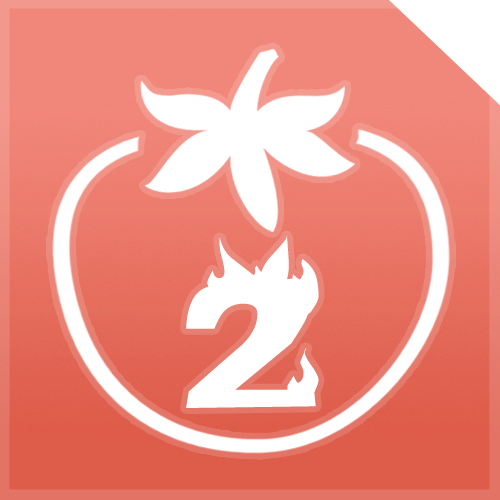
<style>
.page{position:relative;width:500px;height:500px}
.page>*{position:absolute;margin:0}
.t1{font:207.7px "Flame";color:#ffffff;font-weight:bold;scale:1.29 1}
</style>
<div class="page">
<p class="t1" style="left:186px;top:236px;width:133px;height:172px">2</p>
</div>
